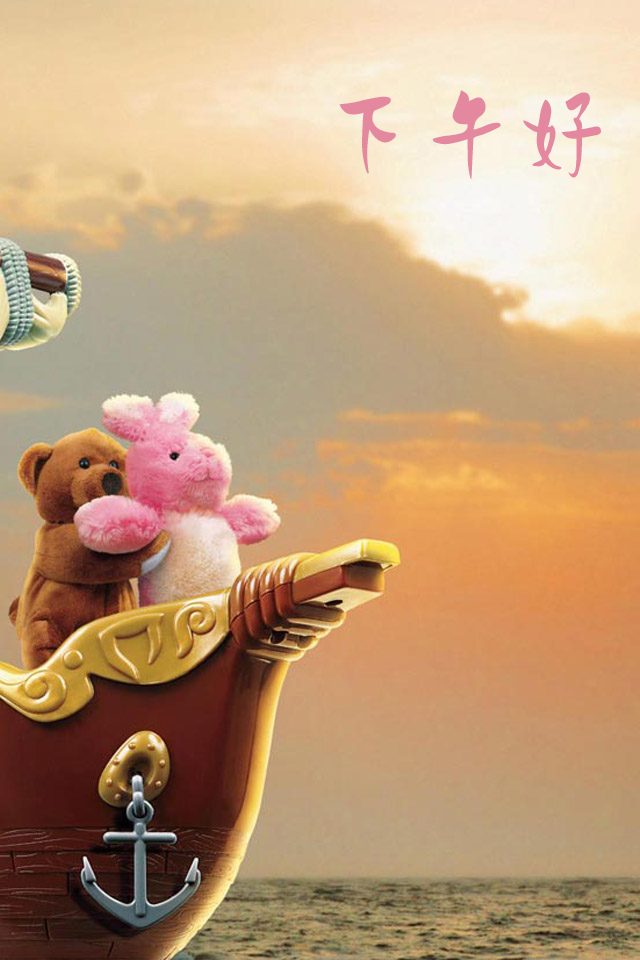
<style>
.page{position:relative;width:640px;height:960px}
.page>*{position:absolute;margin:0}
.t1{font:100px "¾­µä·±ÖÐ±ä Regular";color:#e3889f}
</style>
<div class="page">
<p class="t1" style="left:339px;top:90px;width:262px;height:89px">下午好</p>
</div>
